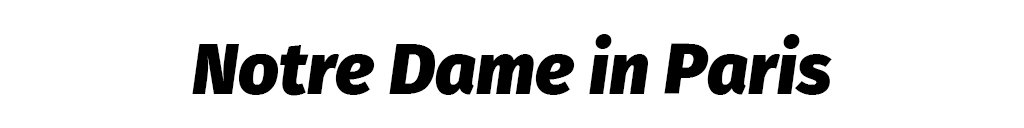
<style>
.page{position:relative;width:1024px;height:128px;background:#ffffff}
.page>*{position:absolute;margin:0}
.t1{font:71.8px "FiraSans-BlackItalic";color:#000000}
</style>
<div class="page">
<p class="t1" style="left:192px;top:34px;width:640px;height:62px">Notre Dame in Paris</p>
</div>
